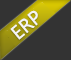
<style>
.page{position:relative;width:71px;height:60px;background:#333333}
.page>*{position:absolute;margin:0}
.t1{font:18px "MicrosoftYaHei";letter-spacing:0.01em;color:#f5f5f5}
</style>
<div class="page">
<p class="t1" style="left:10px;top:10px;width:28px;height:30px;rotate:-40deg">ERP</p>
</div>
